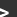
<style>
.page{position:relative;width:17px;height:17px;background:#333333}
.page>*{position:absolute;margin:0}
.t1{font:18px "Arial-BoldMT";color:#fefefe}
</style>
<div class="page">
<p class="t1" style="left:0px;top:8px;width:9px;height:10px">&gt;</p>
</div>
